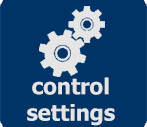
<style>
.page{position:relative;width:147px;height:127px;background:#003366}
.page>*{position:absolute;margin:0}
.t1{font:22px "Tahoma-Bold";color:#e5e5e5}
</style>
<div class="page">
<p class="t1" style="left:27px;top:77px;width:88px;height:49px;text-align:center">control<br>settings</p>
</div>
